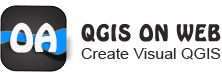
<style>
.page{position:relative;width:222px;height:79px;background:#ffffff}
.page>*{position:absolute;margin:0}
.t1{font:33.2px "HoboStd";color:#ffffff;font-weight:bold}
.t2{font:19.6px "HoboStd";letter-spacing:0.05em;color:#2b2728;font-weight:bold}
.t3{font:15.2px "ArialMT";color:#2b2728;scale:1.05 1}
</style>
<div class="page">
<p class="t1" style="left:10px;top:22px;width:47px;height:31px">OA</p>
<p class="t2" style="left:81px;top:23px;width:140px;height:19px">QGIS ON WEB</p>
<p class="t3" style="left:81px;top:48px;width:140px;height:12px">Create Visual QGIS</p>
</div>
